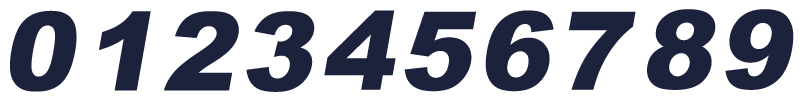
<style>
.page{position:relative;width:800px;height:100px;background:#ffffff}
.page>*{position:absolute;margin:0}
.t1{font:108.8px "Arial-Black";letter-spacing:0.05em;color:#1c223c;font-style:italic}
</style>
<div class="page">
<p class="t1" style="left:10px;top:10px;width:67px;height:82px">0</p>
<p class="t1" style="left:99px;top:11px;width:216px;height:81px">123</p>
<p class="t1" style="left:324px;top:10px;width:312px;height:82px">4567</p>
<p class="t1" style="left:647px;top:9px;width:147px;height:81px">89</p>
</div>
